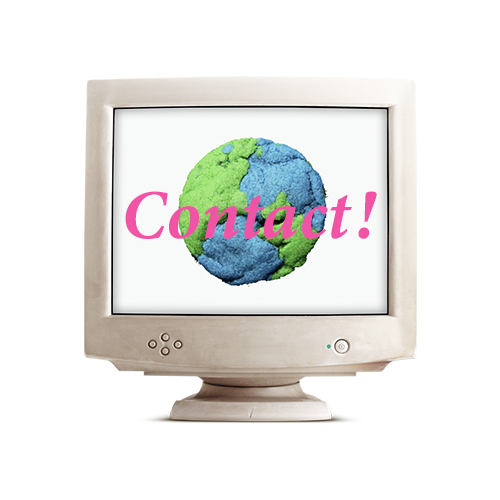
<style>
.page{position:relative;width:500px;height:500px;background:#ffffff}
.page>*{position:absolute;margin:0}
.t1{font:70px "MinionConceptItalic-BoldItalic";color:#f154a5}
</style>
<div class="page">
<p class="t1" style="left:125px;top:191px;width:252px;height:48px">Contact!</p>
</div>
